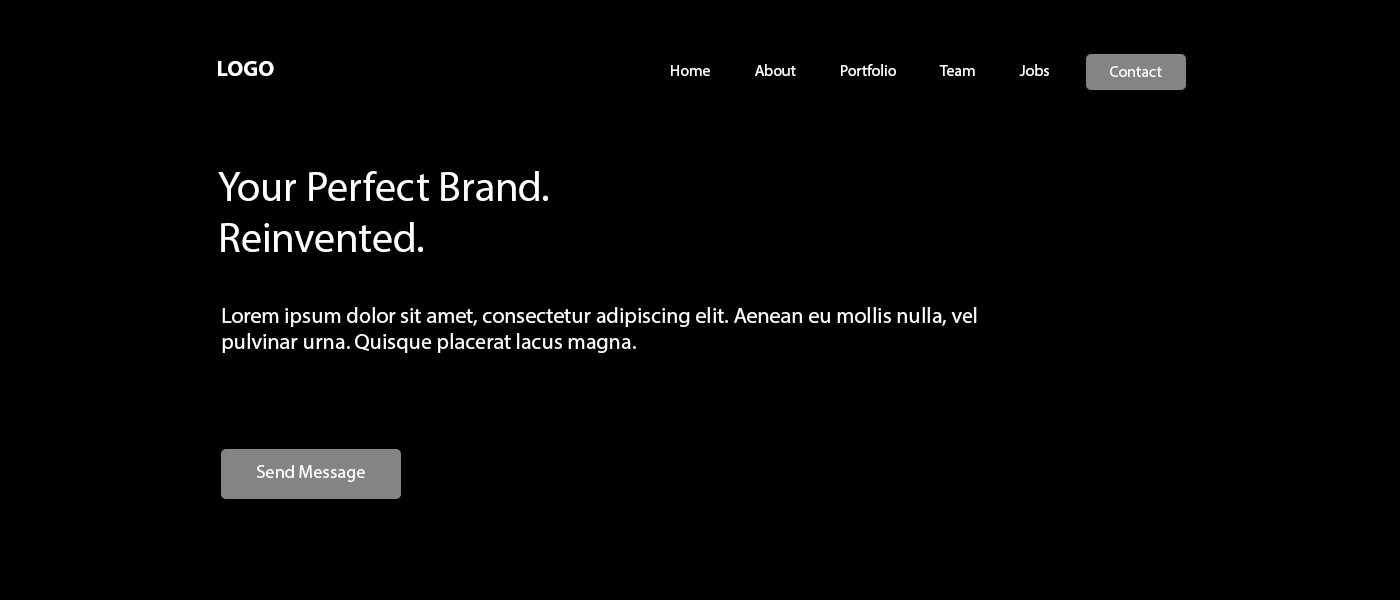
<style>
.page{position:relative;width:1400px;height:600px;background:#000000}
.page>*{position:absolute;margin:0}
.t1{font:22px "MyriadPro-Bold";color:#ffffff;text-transform:uppercase}
.t2{font:16px "MyriadPro-Regular";color:#ffffff}
.t3{font:42px "MyriadPro-Regular";color:#ffffff}
.t4{font:22px "MyriadPro-Regular";color:#ffffff}
.t5{font:18px "MyriadPro-Regular";color:#ffffff}
</style>
<div class="page">
<p class="t1" style="left:218px;top:61px;width:56px;height:15px">Logo</p>
<p class="t2" style="left:671px;top:64px;width:378px;height:12px">Home             About             Portfolio             Team             Jobs</p>
<p class="t2" style="left:1110px;top:66px;width:52px;height:11px">Contact</p>
<p class="t3" style="left:218px;top:171px;width:330px;height:81px">Your Perfect Brand.<br>Reinvented.</p>
<p class="t4" style="left:222px;top:307px;width:755px;height:46px">Lorem ipsum dolor sit amet, consectetur adipiscing elit. Aenean eu mollis nulla, vel pulvinar urna. Quisque placerat lacus magna.</p>
<p class="t5" style="left:257px;top:465px;width:108px;height:17px">Send Message</p>
</div>
